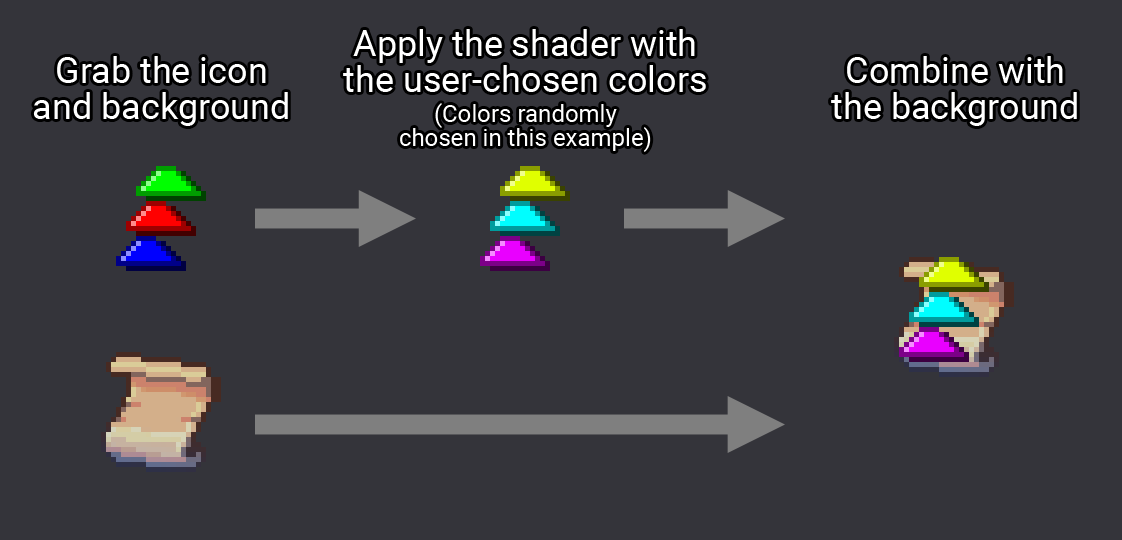
<style>
.page{position:relative;width:1122px;height:540px;background:#34343a}
.page>*{position:absolute;margin:0}
.t1{font:36px/36px "Roboto-Regular";color:#ffffff}
.t2{font:36px/30px "Roboto-Regular";color:#ffffff}
.t3{font:24px/30px "Roboto-Regular";color:#ffffff}
.t4{font:24px/24px "Roboto-Regular";color:#ffffff}
</style>
<div class="page">
<p class="t1" style="left:343px;top:29px;width:363px;height:123px;text-align:center">Apply the shader with<br>the user-cho<span class="t2">sen colors<br></span><span class="t3">(Colors ran</span><span class="t4">domly<br>chosen in this example)</span></p>
<p class="t1" style="left:33px;top:56px;width:255px;height:70px;text-align:center">Grab the icon<br>and background</p>
<p class="t1" style="left:831px;top:56px;width:246px;height:70px;text-align:center">Combine with<br>the background</p>
</div>
